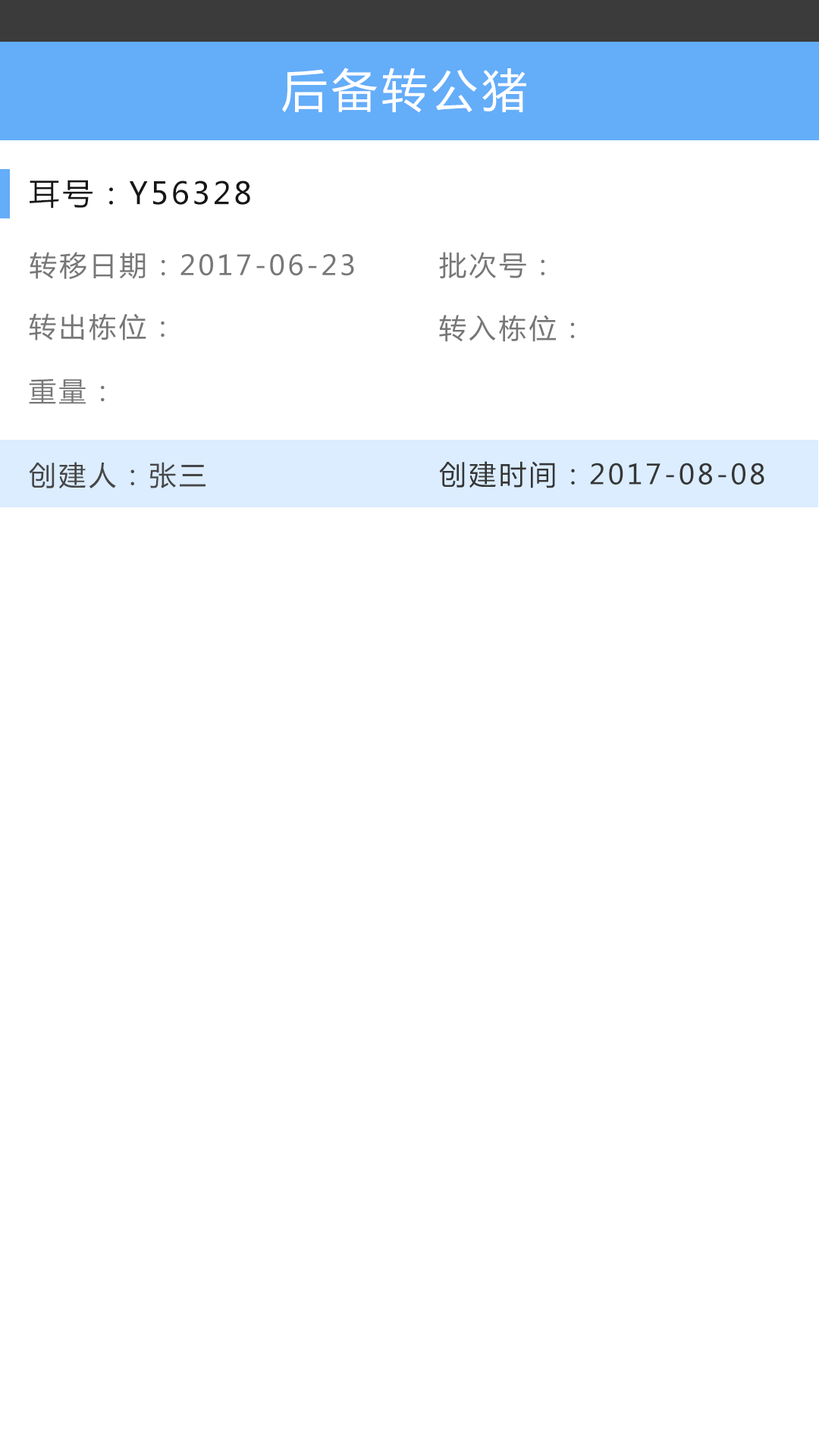
<style>
.page{position:relative;width:819px;height:1456px;background:#ffffff}
.page>*{position:absolute;margin:0}
.t1{font:45.5px "MicrosoftYaHei";letter-spacing:0.1em;color:#ffffff}
.t2{font:30.3px "MicrosoftYaHei";letter-spacing:0.1em;color:#161616}
.t3{font:27.3px "MicrosoftYaHei";letter-spacing:0.1em;color:#777777}
.t4{font:27.3px "MicrosoftYaHei";letter-spacing:0.1em;color:#474747}
.t5{font:27.3px "MicrosoftYaHei";letter-spacing:0.1em;color:#363636}
</style>
<div class="page">
<p class="t1" style="left:282px;top:67px;width:244px;height:46px">后备转公猪</p>
<p class="t2" style="left:30px;top:180px;width:220px;height:29px">耳号：Y56328</p>
<p class="t3" style="left:30px;top:252px;width:324px;height:27px">转移日期：2017-06-23</p>
<p class="t3" style="left:439px;top:252px;width:105px;height:27px">批次号：</p>
<p class="t3" style="left:29px;top:313px;width:136px;height:27px">转出栋位：</p>
<p class="t3" style="left:439px;top:315px;width:136px;height:27px">转入栋位：</p>
<p class="t3" style="left:29px;top:378px;width:76px;height:26px">重量：</p>
<p class="t4" style="left:29px;top:462px;width:177px;height:27px">创建人：张三</p>
<p class="t5" style="left:439px;top:461px;width:325px;height:27px">创建时间：2017-08-08</p>
</div>
